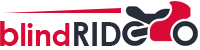
<style>
.page{position:relative;width:200px;height:50px;background:#ffffff}
.page>*{position:absolute;margin:0}
.t1{font:29.6px "CenturyGothic-Bold";color:#d80b36}
.t2{font:32.6px "CenturyGothic-Bold";color:#d80b36}
.t3{font:32.6px "CenturyGothic-Bold";color:#282d39}
</style>
<div class="page">
<p class="t1" style="left:0px;top:21px;width:121px;height:25px"><span class="t2">b</span>lind<span class="t3">RID</span></p>
</div>
